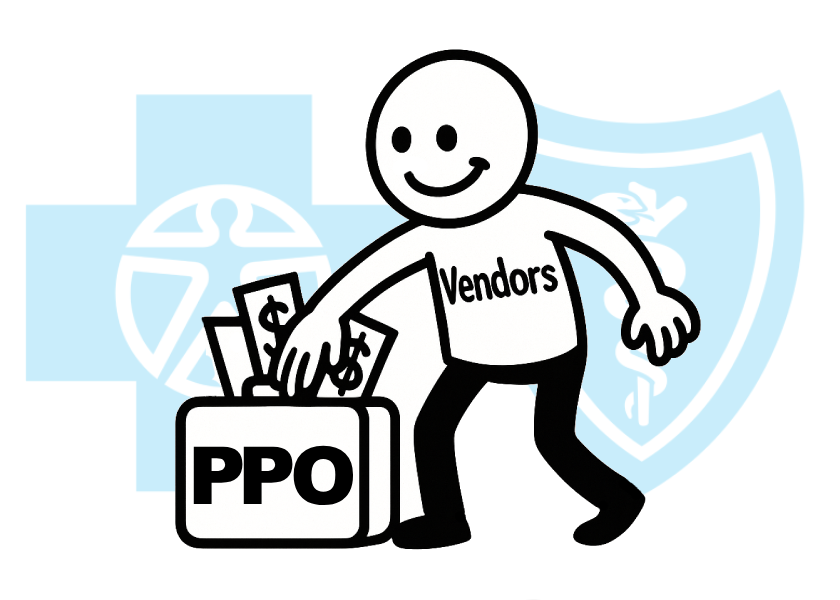
<style>
.page{position:relative;width:840px;height:600px;background:#ffffff}
.page>*{position:absolute;margin:0}
.t1{font:80.1px "Arial-Black";color:#000000}
</style>
<div class="page">
<p class="t1" style="left:193px;top:446px;width:50px;height:58px">P</p>
<p class="t1" style="left:243px;top:446px;width:50px;height:58px">P</p>
<p class="t1" style="left:293px;top:445px;width:61px;height:60px">O</p>
</div>
